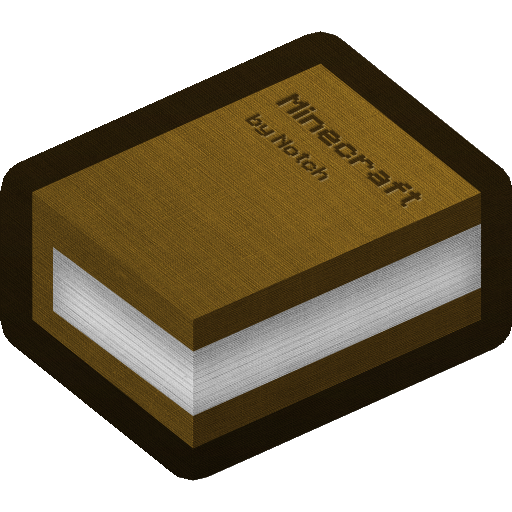
<style>
.page{position:relative;width:512px;height:512px;background:#ffffff}
.page>*{position:absolute;margin:0}
.t1{font:25px "Minecraft";color:#38280c;font-weight:bold;scale:1.1 1}
.t2{font:16.4px "Minecraft";color:#3c2a0e;font-weight:bold;scale:1.1 1}
</style>
<div class="page">
<p class="t1" style="left:276px;top:93px;width:145px;height:114px;rotate:39deg">Minecraft</p>
<p class="t2" style="left:245px;top:113px;width:83px;height:68px;rotate:39deg">by Notch</p>
</div>
